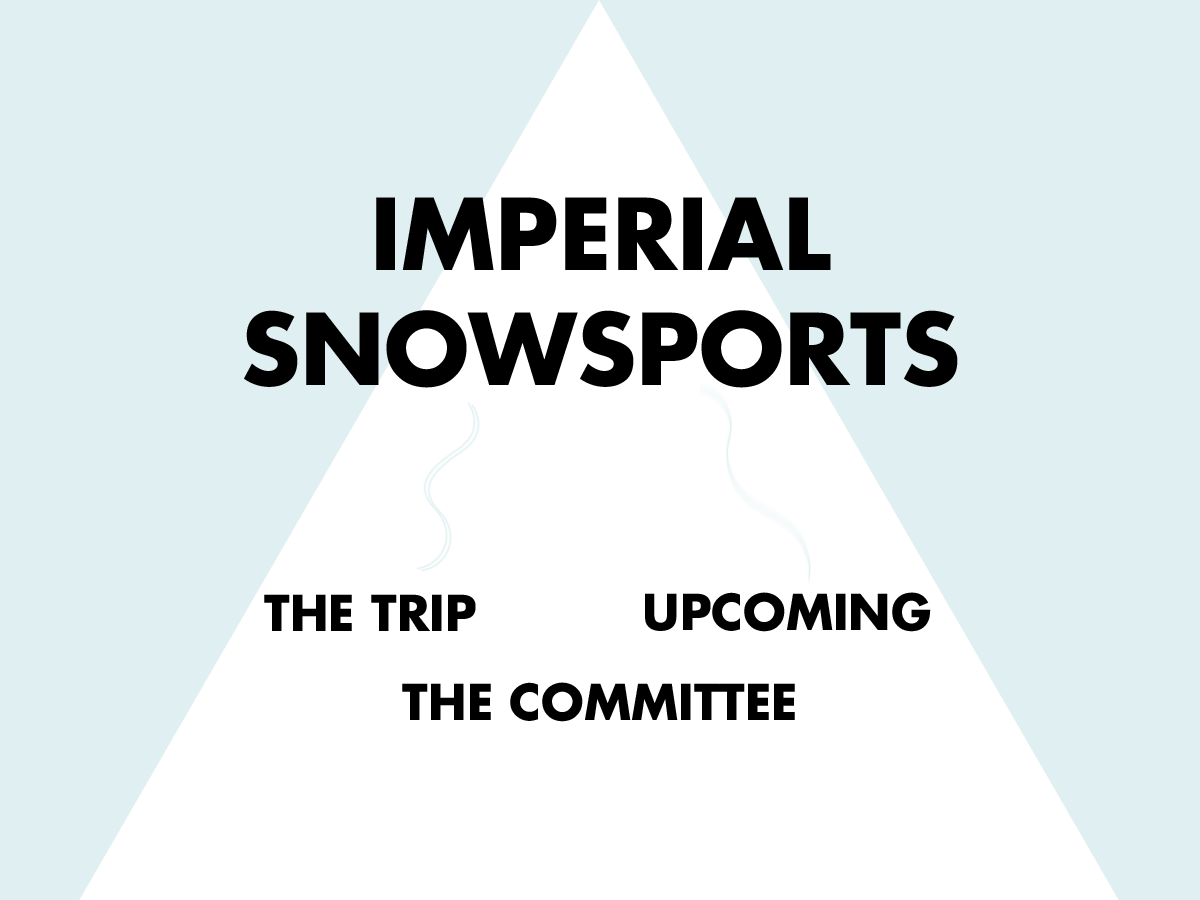
<style>
.page{position:relative;width:1200px;height:900px;background:#e0eff1}
.page>*{position:absolute;margin:0}
.t1{font:96px "FuturaLT-Bold";color:#000000}
.t2{font:48px "FuturaLT-Bold";color:#000000}
</style>
<div class="page">
<p class="t1" style="left:244px;top:197px;width:714px;height:191px;text-align:center">IMPERIAL<br>SNOWSPORTS</p>
<p class="t2" style="left:645px;top:592px;width:286px;height:40px">UPCOMING</p>
<p class="t2" style="left:264px;top:594px;width:212px;height:37px">THE TRIP</p>
<p class="t2" style="left:402px;top:682px;width:393px;height:40px">THE COMMITTEE</p>
</div>
